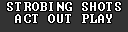
<style>
.page{position:relative;width:128px;height:32px;background:#333333}
.page>*{position:absolute;margin:0}
.t1{font:12px/11.9px "Terminal";letter-spacing:0.075em;color:#ffffff}
</style>
<div class="page">
<p class="t1" style="left:7px;top:2px;width:114px;height:21px;text-align:center">STROBING SHOTS<br>ACT OUT PLAY</p>
</div>
